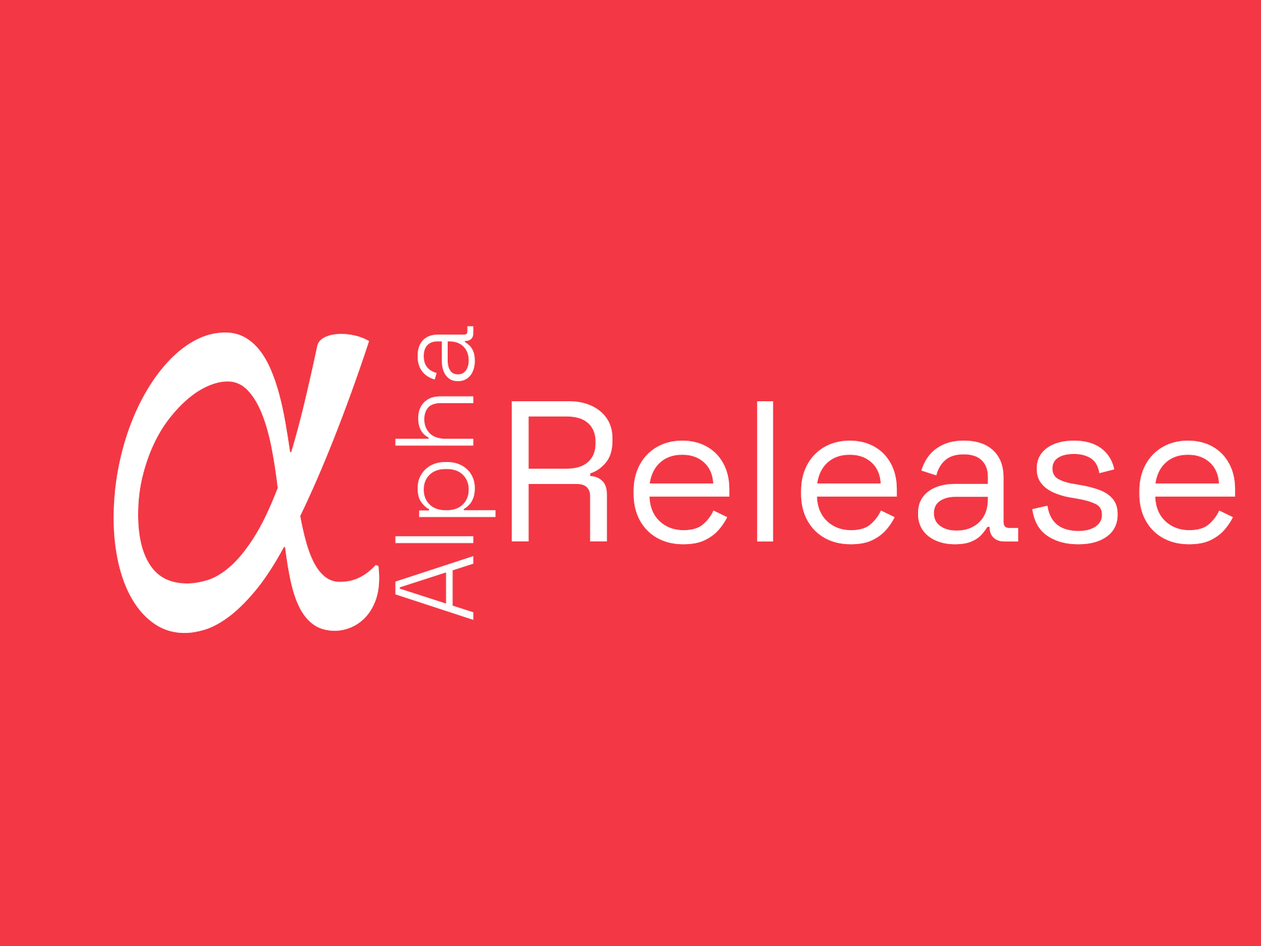
<style>
.page{position:relative;width:1261px;height:946px;background:#f43744}
.page>*{position:absolute;margin:0}
.t1{font:111.1px "SpaceGrotesk-Light";color:#ffffff}
.t2{font:812.5px "Gabriola";color:#ffffff}
.t3{font:200.2px "SpaceGrotesk-Regular";color:#ffffff}
</style>
<div class="page">
<p class="t1" style="left:395px;top:326px;width:101px;height:294px;rotate:-90deg">Alpha</p>
<p class="t2" style="left:113px;top:332px;width:267px;height:301px">α</p>
<p class="t3" style="left:512px;top:401px;width:724px;height:143px">Release</p>
</div>
